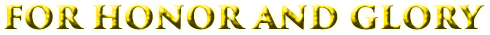
<style>
.page{position:relative;width:490px;height:35px}
.page>*{position:absolute;margin:0}
.t1{font:36px "TrajanPro3-Bold"}
</style>
<div class="page">
<p class="t1" style="left:4px;top:4px;width:481px;height:26px">for honor and glory</p>
</div>
